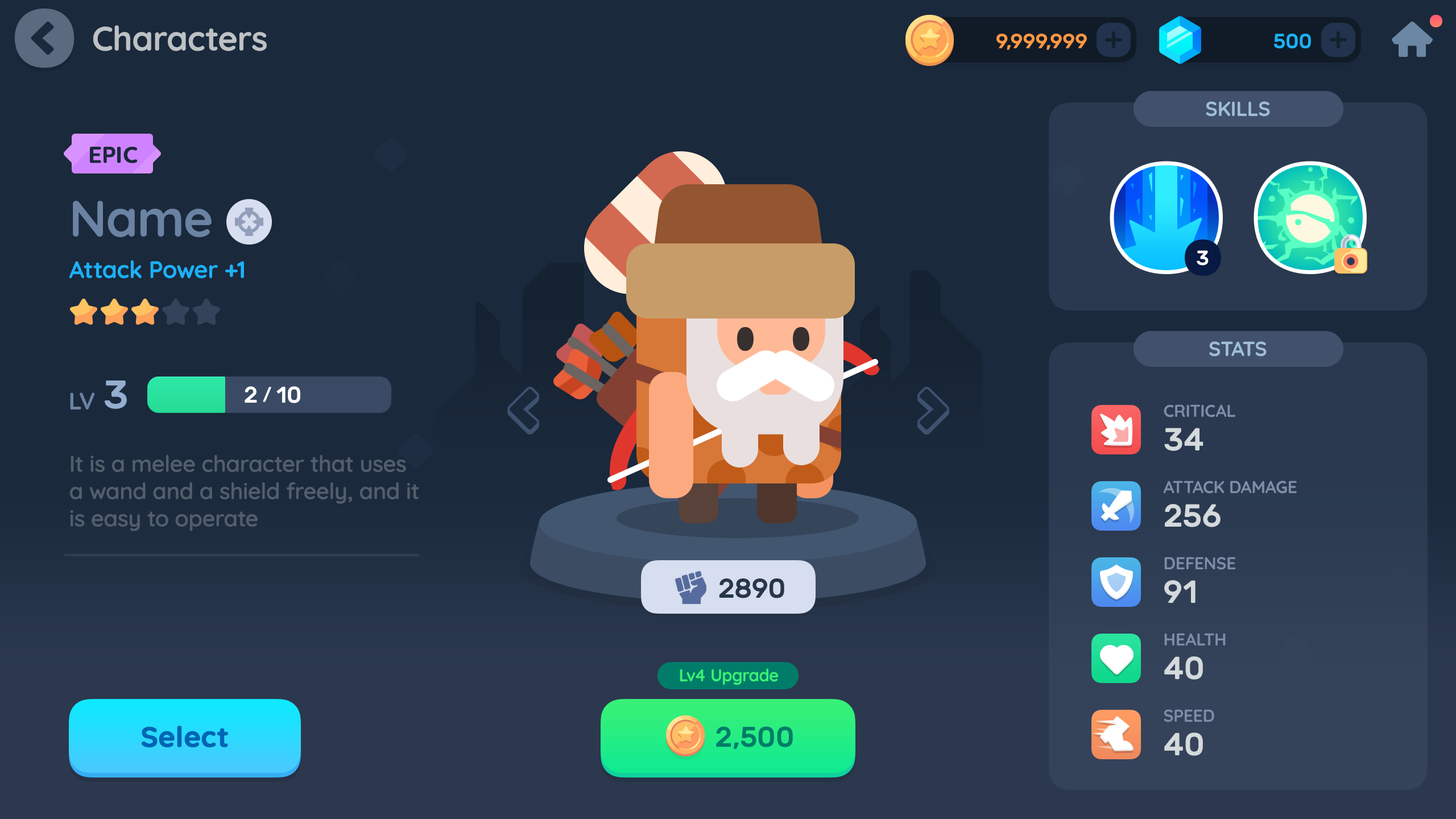
<style>
.page{position:relative;width:1456px;height:819px;background:#1a293c}
.page>*{position:absolute;margin:0}
.t1{font:34.1px "Quicksand-Bold";letter-spacing:-0.01em;color:#bdc1c4}
.t2{font:20.5px "Rubik-Medium";letter-spacing:-0.01em;color:#fd9744;text-transform:uppercase}
.t3{font:20.5px "Rubik-Medium";letter-spacing:-0.01em;color:#1cb0f6;text-transform:uppercase}
.t4{font:20.5px "Quicksand-Bold";letter-spacing:-0.01em;color:#a0bdd8;text-transform:uppercase}
.t5{font:22.7px "Quicksand-Bold";color:#1a293c;text-transform:uppercase;font-weight:bold}
.t6{font:51.2px "Quicksand-Bold";letter-spacing:-0.01em;color:#6b83a2}
.t7{font:20.5px "Rubik-Medium";letter-spacing:-0.01em;color:#ffffff}
.t8{font:23.9px "Quicksand-Bold";letter-spacing:-0.01em;color:#1cb0f6}
.t9{font:39.8px "Rubik-Medium";letter-spacing:-0.01em;color:#94aed0}
.t10{font:22.7px "Rubik-Medium";letter-spacing:-0.01em;color:#ffffff;text-transform:uppercase}
.t11{font:17.1px "Rubik-Medium";letter-spacing:-0.01em;color:#ffffff;text-transform:uppercase}
.t12{font:23.9px "Quicksand-Bold";letter-spacing:-0.01em;color:#6b83a2}
.t13{font:17.1px "Quicksand-Bold";letter-spacing:-0.01em;color:#7d8da7;text-transform:uppercase}
.t14{font:31.8px "Rubik-Medium";letter-spacing:-0.01em;color:#d4d9dc;text-transform:uppercase}
.t15{font:22.7px "Quicksand-SemiBold";letter-spacing:-0.01em;color:#535e6c}
.t16{font:27.3px "Rubik-Medium";letter-spacing:-0.01em;color:#28364b;text-transform:uppercase}
.t17{font:17.1px "Quicksand-Bold";letter-spacing:-0.01em;color:#39f175}
.t18{font:28.4px "Quicksand-Bold";color:#0065b4;font-weight:bold}
.t19{font:28.4px "Rubik-Medium";letter-spacing:-0.01em;color:#007c69}
</style>
<div class="page">
<p class="t1" style="left:93px;top:25px;width:174px;height:26px">Characters</p>
<p class="t2" style="left:996px;top:34px;width:91px;height:16px">9,999,999</p>
<p class="t3" style="left:1274px;top:34px;width:37px;height:14px">500</p>
<p class="t4" style="left:1206px;top:101px;width:64px;height:16px">Skills</p>
<p class="t5" style="left:90px;top:147px;width:48px;height:16px">Epic</p>
<p class="t6" style="left:73px;top:201px;width:139px;height:36px">Name</p>
<p class="t7" style="left:1197px;top:250px;width:12px;height:16px">3</p>
<p class="t8" style="left:69px;top:260px;width:175px;height:19px">Attack Power +1</p>
<p class="t4" style="left:1209px;top:341px;width:58px;height:16px">Stats</p>
<p class="t9" style="left:105px;top:380px;width:22px;height:29px">3</p>
<p class="t10" style="left:245px;top:386px;width:55px;height:17px">2 <span class="t11">/</span> 10</p>
<p class="t12" style="left:70px;top:392px;width:25px;height:17px">LV</p>
<p class="t13" style="left:1164px;top:404px;width:71px;height:13px">Critical</p>
<p class="t14" style="left:1164px;top:428px;width:39px;height:23px">34</p>
<p class="t15" style="left:70px;top:454px;width:349px;height:77px">It is a melee character that uses<br>a wand and a shield freely, and it<br>is easy to operate</p>
<p class="t13" style="left:1163px;top:481px;width:134px;height:13px">Attack Damage</p>
<p class="t14" style="left:1165px;top:504px;width:56px;height:23px">256</p>
<p class="t13" style="left:1164px;top:557px;width:72px;height:13px">Defense</p>
<p class="t16" style="left:719px;top:578px;width:65px;height:20px">2890</p>
<p class="t14" style="left:1164px;top:580px;width:31px;height:23px">91</p>
<p class="t13" style="left:1164px;top:633px;width:62px;height:13px">Health</p>
<p class="t14" style="left:1164px;top:656px;width:39px;height:24px">40</p>
<p class="t17" style="left:680px;top:668px;width:99px;height:17px">Lv4 Upgrade</p>
<p class="t13" style="left:1164px;top:709px;width:50px;height:13px">Speed</p>
<p class="t18" style="left:142px;top:726px;width:86px;height:21px">Select</p>
<p class="t19" style="left:716px;top:726px;width:77px;height:23px">2,500</p>
<p class="t14" style="left:1164px;top:733px;width:39px;height:23px">40</p>
</div>
